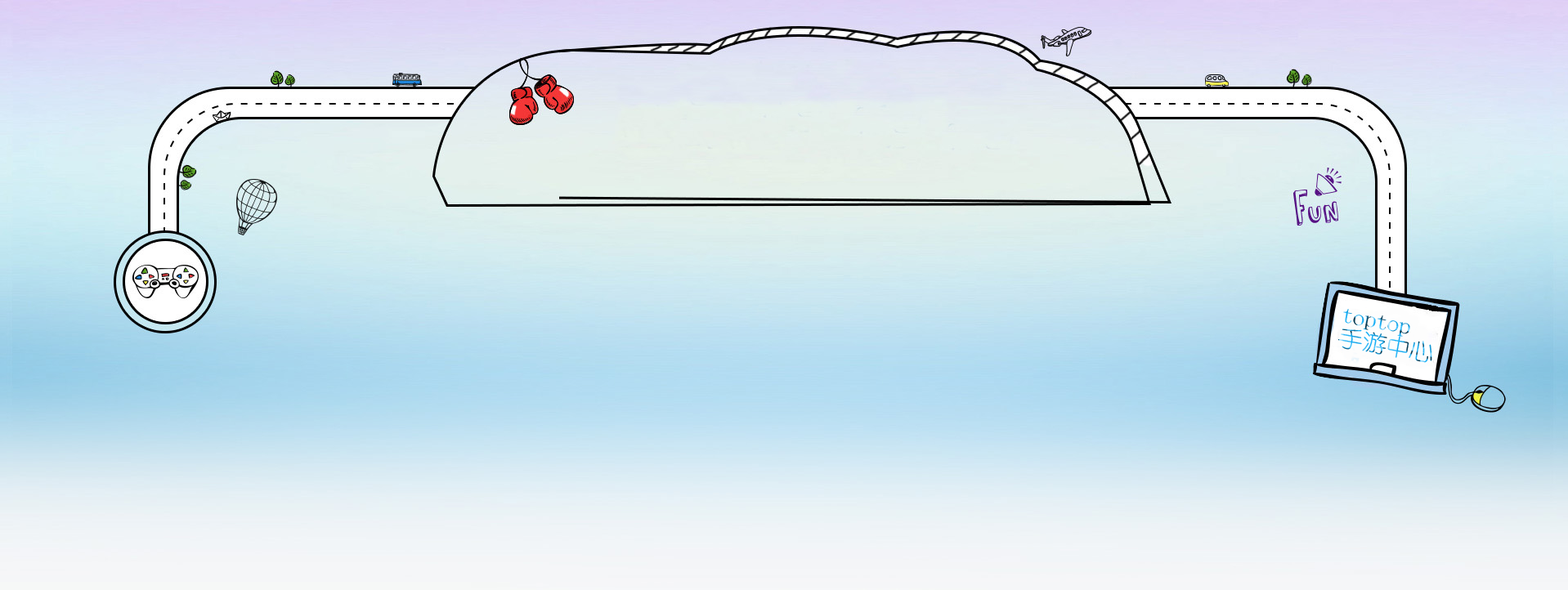
<style>
.page{position:relative;width:1568px;height:590px}
.page>*{position:absolute;margin:0}
.t1{font:23.1px/21.6px "YouYuan";scale:1.1 1}
</style>
<div class="page">
<p class="t1" style="left:1337px;top:309px;width:95px;height:54px;rotate:10deg">toptop<br>手游中心</p>
</div>
